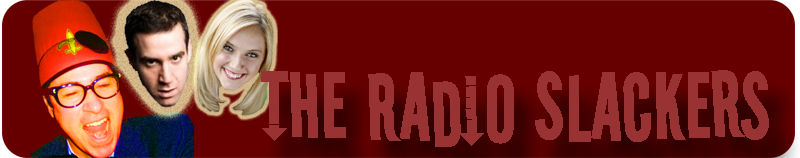
<style>
.page{position:relative;width:800px;height:158px;background:#660000}
.page>*{position:absolute;margin:0}
.t1{font:102px "Stereofidelic";color:#993333;font-weight:bold}
</style>
<div class="page">
<p class="t1" style="left:261px;top:70px;width:508px;height:77px">The Radio slackers</p>
</div>
